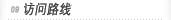
<style>
.page{position:relative;width:171px;height:20px;background:#ffffff}
.page>*{position:absolute;margin:0}
.t1{font:8px "MDSol";color:#aaaaaa;font-weight:bold;font-style:italic;scale:0.85 1}
.t2{font:14px "New-Gulim";color:#3f3f3f;font-weight:bold;font-style:italic;scale:0.85 1}
</style>
<div class="page">
<p class="t1" style="left:11px;top:6px;width:9px;height:7px">09</p>
<p class="t2" style="left:24px;top:2px;width:47px;height:14px">访问路线</p>
</div>
